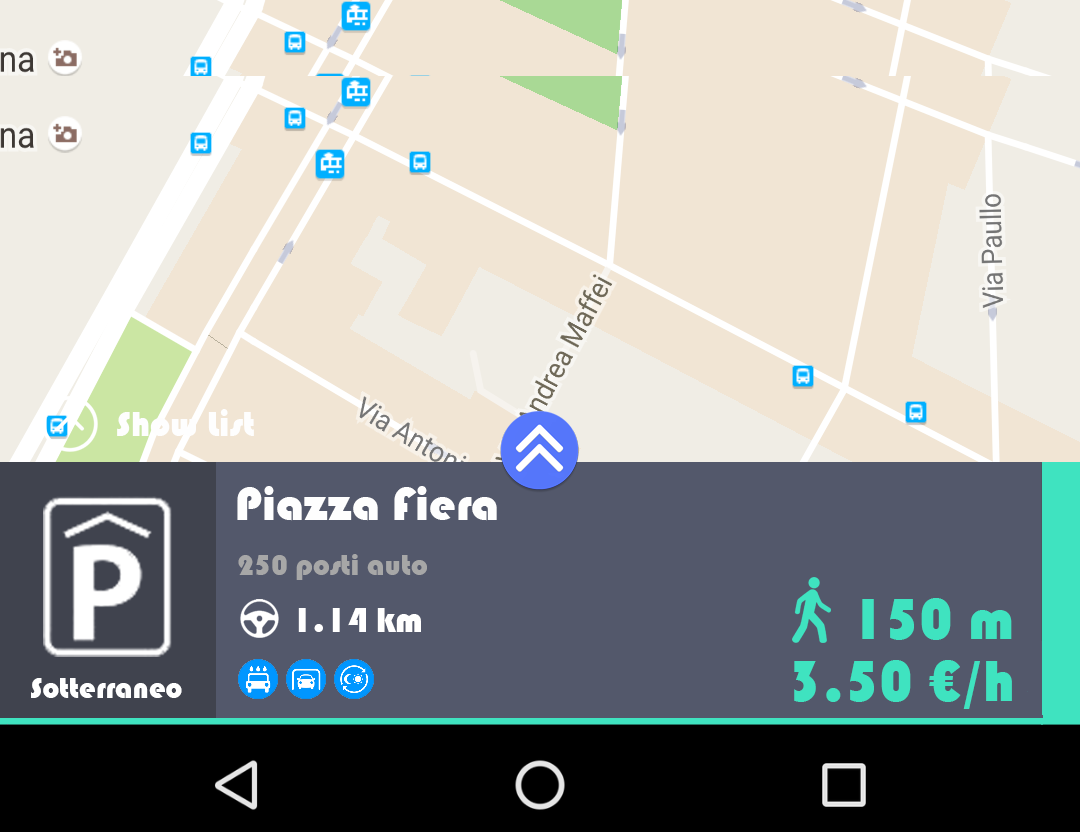
<style>
.page{position:relative;width:1080px;height:832px;background:#f1e5d4}
.page>*{position:absolute;margin:0}
.t1{font:36px "Bauhaus93";color:#fefefe}
.t2{font:48px "Bauhaus93";color:#fefefe}
.t3{font:30px "Bauhaus93";color:#a7a7a7}
.t4{font:60px "Bauhaus93";color:#3fe3c0}
.t5{font:36px "Bauhaus93";color:#ffffff}
.t6{font:30px "Bauhaus93";color:#ffffff}
</style>
<div class="page">
<p class="t1" style="left:117px;top:409px;width:137px;height:27px">Show List</p>
<p class="t2" style="left:237px;top:486px;width:260px;height:35px">Piazza Fiera</p>
<p class="t3" style="left:238px;top:554px;width:189px;height:26px">250 posti auto</p>
<p class="t4" style="left:862px;top:598px;width:150px;height:42px">150 m</p>
<p class="t5" style="left:298px;top:608px;width:123px;height:24px">1.14 km</p>
<p class="t4" style="left:794px;top:660px;width:218px;height:49px">3.50 €/h</p>
<p class="t6" style="left:31px;top:678px;width:151px;height:20px">Sotterraneo</p>
</div>
